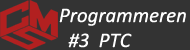
<style>
.page{position:relative;width:190px;height:50px;background:#333333}
.page>*{position:absolute;margin:0}
.t1{font:20.8px "Calibri-Italic";color:#ffffff}
</style>
<div class="page">
<p class="t1" style="left:59px;top:8px;width:127px;height:40px">Programmeren<br>  #3  PTC</p>
</div>
